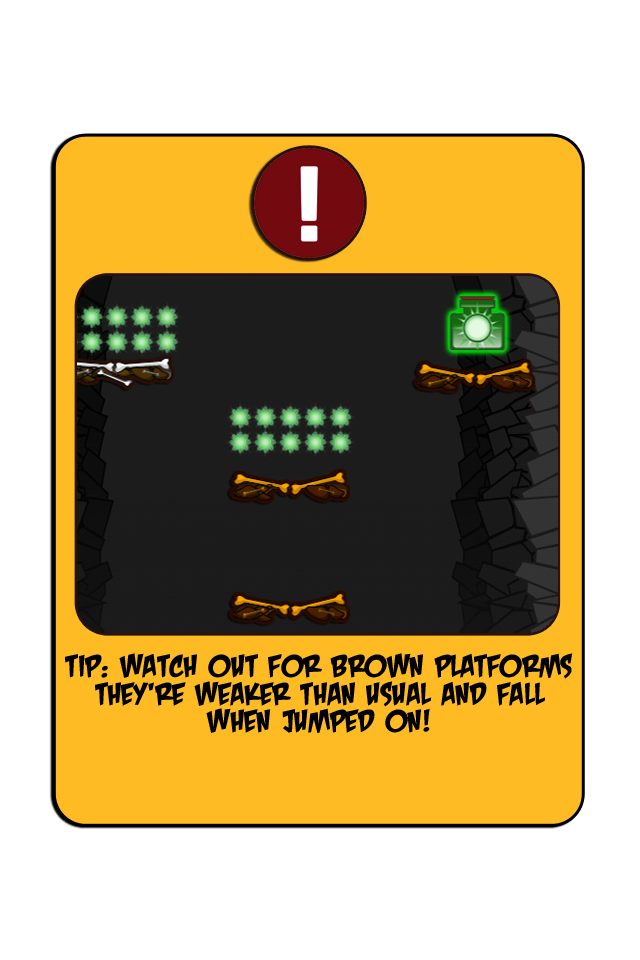
<style>
.page{position:relative;width:640px;height:960px;background:#ffffff}
.page>*{position:absolute;margin:0}
.t1{font:43.9px/27.4px "CrashLandingBB";color:#000000}
</style>
<div class="page">
<p class="t1" style="left:65px;top:653px;width:508px;height:81px;text-align:center">tip: watch out for brown platforms<br>they‘re weaker than usual and fall<br>when jumped on!</p>
</div>
